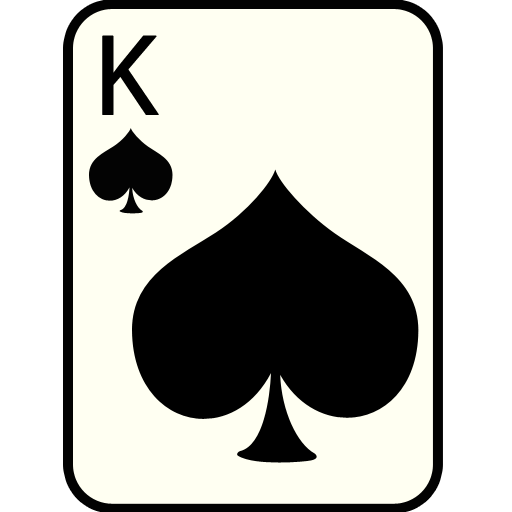
<style>
.page{position:relative;width:512px;height:512px;background:#fffff2}
.page>*{position:absolute;margin:0}
.t1{font:200px "MyriadPro-Regular";letter-spacing:-0.05em;color:#000000;font-variant:small-caps;font-weight:bold}
</style>
<div class="page">
<p class="t1" style="left:102px;top:35px;width:57px;height:80px">K</p>
</div>
